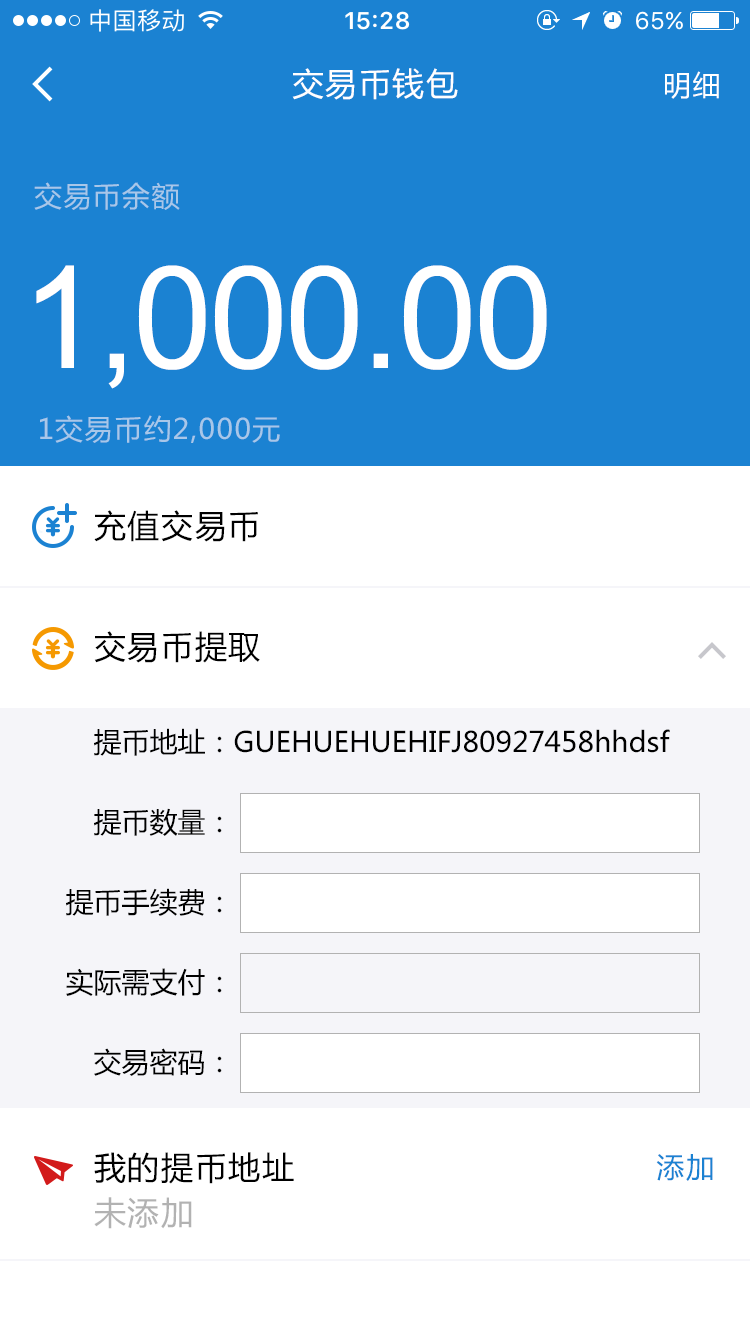
<style>
.page{position:relative;width:750px;height:1334px;background:#ffffff}
.page>*{position:absolute;margin:0}
.t1{font:32px "MicrosoftYaHei";letter-spacing:0.05em;color:#ffffff}
.t2{font:28px "MicrosoftYaHei";letter-spacing:0.05em;color:#ffffff}
.t3{font:28px "MicrosoftYaHei";letter-spacing:0.05em;color:#a8c7e9}
.t4{font:142.5px "ArialMT";letter-spacing:-0.022em;color:#ffffff}
.t5{font:32px "MicrosoftYaHei";letter-spacing:0.05em;color:#000000}
.t6{font:28px "MicrosoftYaHei";color:#000000}
.t7{font:28px "MicrosoftYaHei";letter-spacing:0.05em;color:#1b82d2}
.t8{font:32px "MicrosoftYaHei";letter-spacing:0.05em;color:#b3b3b3}
</style>
<div class="page">
<p class="t1" style="left:292px;top:68px;width:166px;height:32px">交易币钱包</p>
<p class="t2" style="left:665px;top:71px;width:54px;height:28px">明细</p>
<p class="t3" style="left:34px;top:182px;width:146px;height:28px">交易币余额</p>
<p class="t4" style="left:36px;top:265px;width:511px;height:124px">1,000.00</p>
<p class="t3" style="left:40px;top:415px;width:240px;height:28px">1交易币约2,000元</p>
<p class="t5" style="left:94px;top:510px;width:164px;height:32px">充值交易币</p>
<p class="t5" style="left:94px;top:631px;width:166px;height:32px">交易币提取</p>
<p class="t6" style="left:94px;top:728px;width:576px;height:28px">提币地址：GUEHUEHUEHIFJ80927458hhdsf</p>
<p class="t6" style="left:94px;top:808px;width:128px;height:28px">提币数量：</p>
<p class="t6" style="left:66px;top:888px;width:156px;height:28px">提币手续费：</p>
<p class="t6" style="left:66px;top:968px;width:156px;height:28px">实际需支付：</p>
<p class="t6" style="left:94px;top:1048px;width:128px;height:28px">交易密码：</p>
<p class="t5" style="left:94px;top:1152px;width:200px;height:32px">我的提币地址</p>
<p class="t7" style="left:656px;top:1154px;width:57px;height:27px">添加</p>
<p class="t8" style="left:94px;top:1197px;width:98px;height:32px">未添加</p>
</div>
